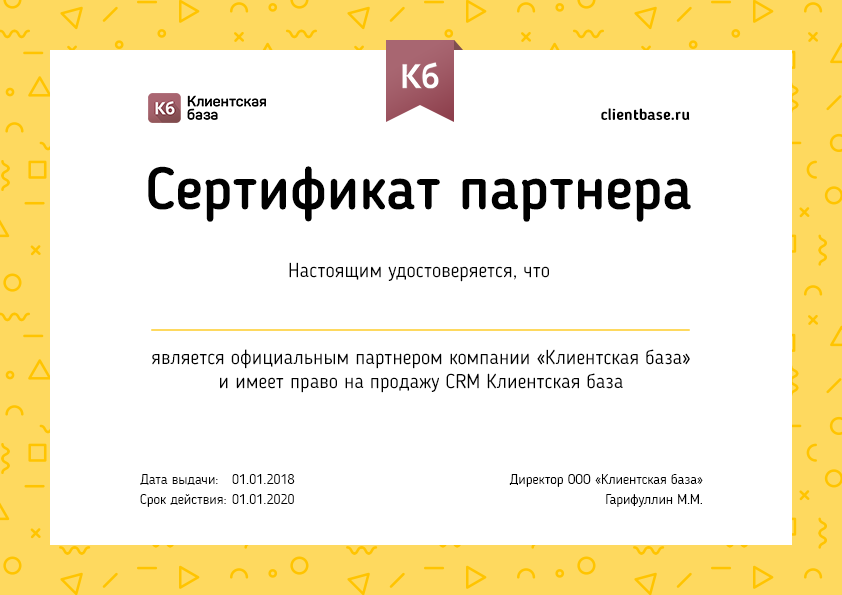
<style>
.page{position:relative;width:842px;height:595px;background:#ffffff}
.page>*{position:absolute;margin:0}
.t1{font:16px "BloggerSans-Bold";color:#000000}
.t2{font:59px "BloggerSans-Medium";color:#000000}
.t3{font:20px "BloggerSans";color:#000000}
.t4{font:14px/20px "BloggerSans-Light";color:#000000}
</style>
<div class="page">
<p class="t1" style="left:601px;top:108px;width:89px;height:12px">clientbase.ru</p>
<p class="t2" style="left:148px;top:166px;width:543px;height:56px">Сертификат партнера</p>
<p class="t3" style="left:289px;top:262px;width:260px;height:20px">Настоящим удостоверяется, что</p>
<p class="t3" style="left:152px;top:349px;width:538px;height:44px;text-align:center">является официальным партнером компании «Клиентская база»<br>и имеет право на продажу CRM Клиентская база</p>
<p class="t4" style="left:140px;top:474px;width:86px;height:33px">Дата выдачи:<br>Срок действия:</p>
<p class="t4" style="left:232px;top:474px;width:63px;height:30px">01.01.2018<br>01.01.2020</p>
<p class="t4" style="left:509px;top:474px;width:194px;height:33px;text-align:right">Директор ООО «Клиентская база»<br>Гарифуллин М.М.</p>
</div>
